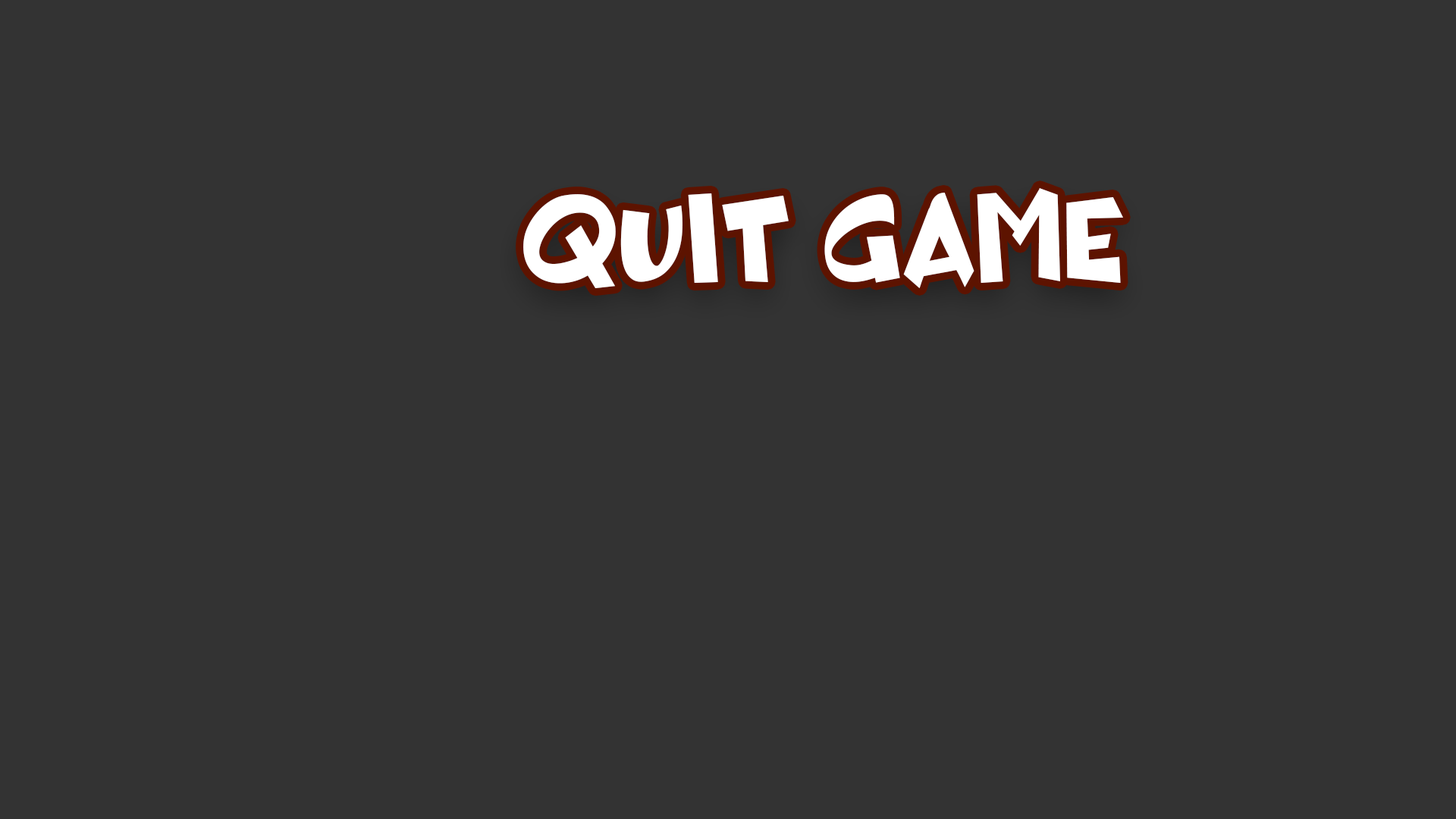
<style>
.page{position:relative;width:1456px;height:819px;background:#333333}
.page>*{position:absolute;margin:0}
.t1{font:136.8px "BLOCKHEADDUDEPersonalUse";color:#ffffff;scale:0.83 1}
</style>
<div class="page">
<p class="t1" style="left:523px;top:188px;width:600px;height:100px">quit game</p>
</div>
